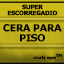
<style>
.page{position:relative;width:64px;height:64px}
.page>*{position:absolute;margin:0}
.t1{font:6px/6px "Verdana-Bold";letter-spacing:-0.06em;color:#000000}
.t2{font:10px/10px "Verdana-Bold";letter-spacing:-0.06em;color:#010101}
</style>
<div class="page">
<p class="t1" style="left:7px;top:4px;width:51px;height:12px;text-align:center">SUPER<br>ESCORREGADIO</p>
<p class="t2" style="left:3px;top:24px;width:59px;height:18px;text-align:center">CERA PARA<br>PISO</p>
</div>
